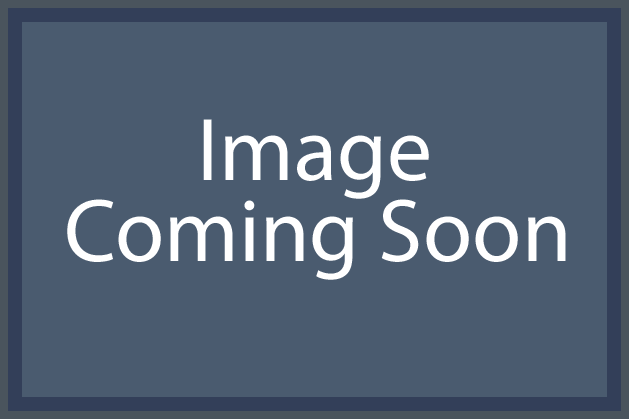
<style>
.page{position:relative;width:629px;height:419px;background:#4a5b6f}
.page>*{position:absolute;margin:0}
.t1{font:89.7px "MyriadPro-Regular";color:#ffffff}
</style>
<div class="page">
<p class="t1" style="left:203px;top:119px;width:226px;height:80px">Image</p>
<p class="t1" style="left:67px;top:199px;width:499px;height:81px">Coming Soon</p>
</div>
